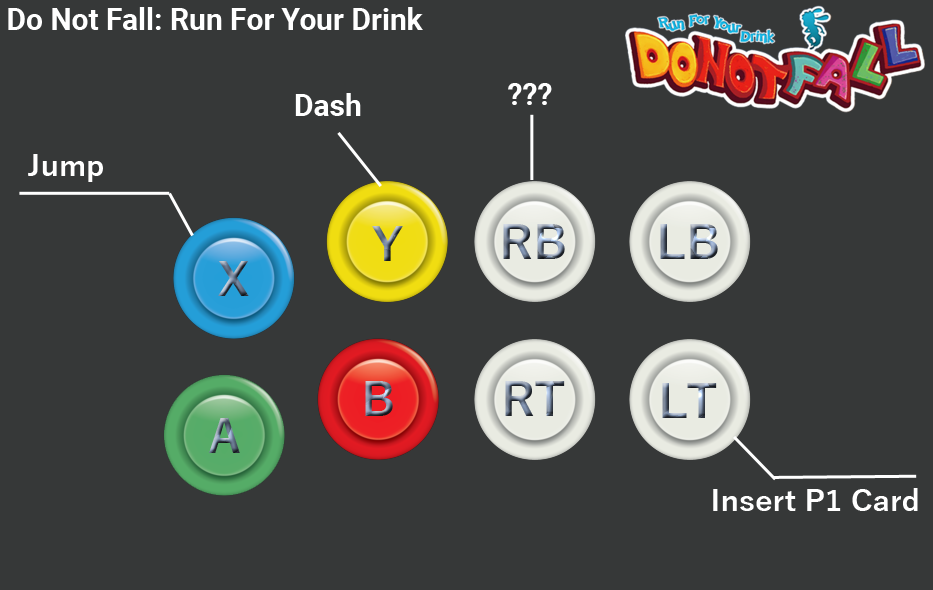
<style>
.page{position:relative;width:933px;height:590px;background:#363838}
.page>*{position:absolute;margin:0}
.t1{font:30px "Roboto-Bold";color:#ffffff}
.t2{font:30px "YuGothic-Bold";color:#ffffff}
</style>
<div class="page">
<p class="t1" style="left:8px;top:7px;width:415px;height:23px">Do Not Fall: Run For Your Drink</p>
<p class="t1" style="left:508px;top:83px;width:44px;height:22px">???</p>
<p class="t1" style="left:295px;top:93px;width:66px;height:23px">Dash</p>
<p class="t2" style="left:28px;top:154px;width:75px;height:28px">Jump</p>
<p class="t2" style="left:713px;top:488px;width:205px;height:23px">Insert P1 Card</p>
</div>
